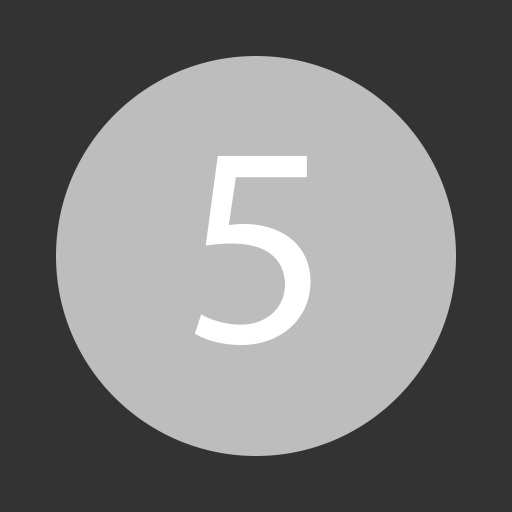
<style>
.page{position:relative;width:512px;height:512px;background:#333333}
.page>*{position:absolute;margin:0}
.t1{font:286px "MyriadPro-Regular";color:#ffffff}
</style>
<div class="page">
<p class="t1" style="left:194px;top:155px;width:117px;height:190px">5</p>
</div>
